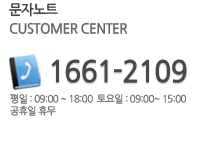
<style>
.page{position:relative;width:203px;height:143px;background:#ffffff}
.page>*{position:absolute;margin:0}
.t1{font:14px "NanumGothicBold";letter-spacing:-0.05em;color:#454545;scale:0.97 1}
.t2{font:14px "NanumGothicBold";letter-spacing:-0.05em;color:#656565;scale:0.97 1}
.t3{font:30px "NanumGothicBold";letter-spacing:-0.05em;color:#484848;scale:0.97 1}
.t4{font:10px/12px "NanumGothic";letter-spacing:-0.05em;color:#656565;scale:0.97 1}
</style>
<div class="page">
<p class="t1" style="left:9px;top:2px;width:49px;height:15px">문자노트</p>
<p class="t2" style="left:9px;top:22px;width:119px;height:13px">CUSTOMER CENTER</p>
<p class="t3" style="left:51px;top:59px;width:136px;height:24px">1661-2109</p>
<p class="t4" style="left:10px;top:94px;width:176px;height:22px">평일 : 09:00 ~ 18:00  토요일 : 09:00~ 15:00<br>공휴일 휴무</p>
</div>
